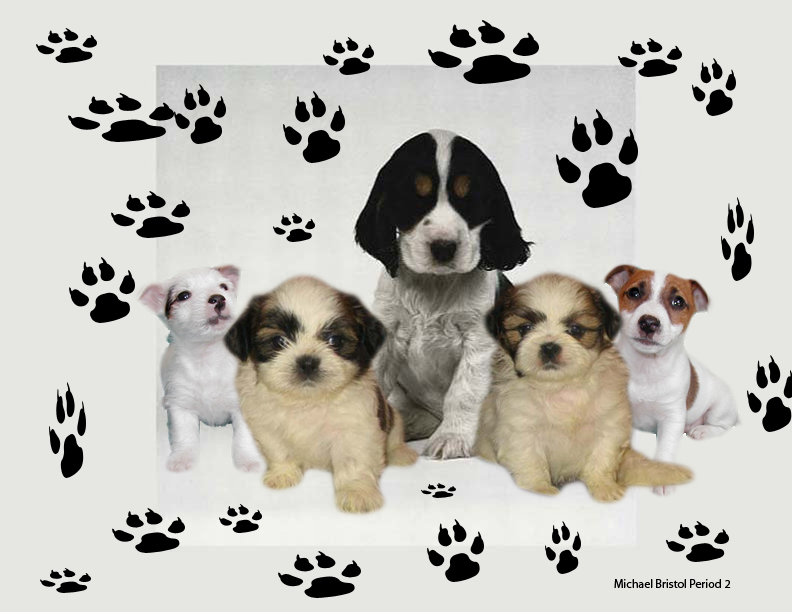
<style>
.page{position:relative;width:792px;height:612px;background:#e6e7e2}
.page>*{position:absolute;margin:0}
.t1{font:12px "MyriadPro-Regular";color:#000000}
</style>
<div class="page">
<p class="t1" style="left:614px;top:579px;width:117px;height:9px">Michael Bristol Period 2</p>
</div>
